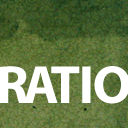
<style>
.page{position:relative;width:128px;height:128px}
.page>*{position:absolute;margin:0}
.t1{font:54px "Myriad-Bold";color:#ffffff}
</style>
<div class="page">
<p class="t1" style="left:0px;top:66px;width:130px;height:38px">RATIO</p>
</div>
